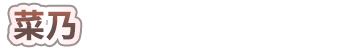
<style>
.page{position:relative;width:360px;height:50px;background:#ffffff}
.page>*{position:absolute;margin:0}
.t1{font:32px "SourceHanSansSC-Bold";font-weight:bold}
</style>
<div class="page">
<p class="t1" style="left:13px;top:9px;width:63px;height:32px">菜乃</p>
</div>
